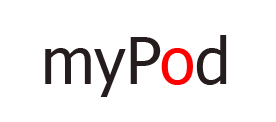
<style>
.page{position:relative;width:276px;height:122px;background:#ffffff}
.page>*{position:absolute;margin:0}
.t1{font:64px "Tahoma";color:#251d1d}
.t2{font:64px "Tahoma";color:#ff0000}
</style>
<div class="page">
<p class="t1" style="left:45px;top:35px;width:182px;height:62px">myP<span class="t2">o</span>d</p>
</div>
